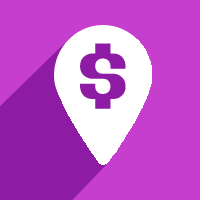
<style>
.page{position:relative;width:200px;height:200px;background:#c63ece}
.page>*{position:absolute;margin:0}
.t1{font:69.5px "DynamicBRK";color:#8d1ba3}
</style>
<div class="page">
<p class="t1" style="left:80px;top:43px;width:46px;height:66px">$</p>
</div>
